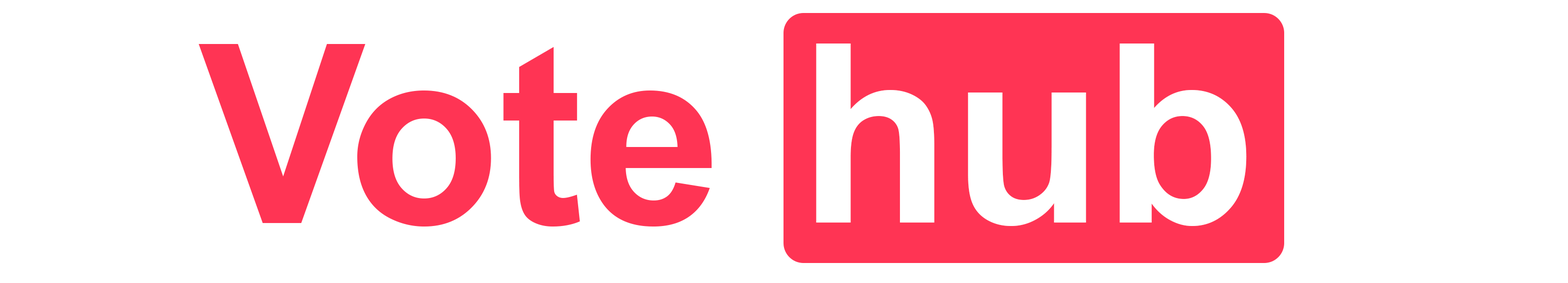
<style>
.page{position:relative;width:1568px;height:283px;background:#ffffff}
.page>*{position:absolute;margin:0}
.t1{font:249.8px "Arial-BoldMT";color:#ff3454}
.t2{font:249.8px "Arial-BoldMT";color:#ffffff}
</style>
<div class="page">
<p class="t1" style="left:198px;top:44px;width:514px;height:182px">Vote</p>
<p class="t2" style="left:816px;top:43px;width:431px;height:183px">hub</p>
</div>
